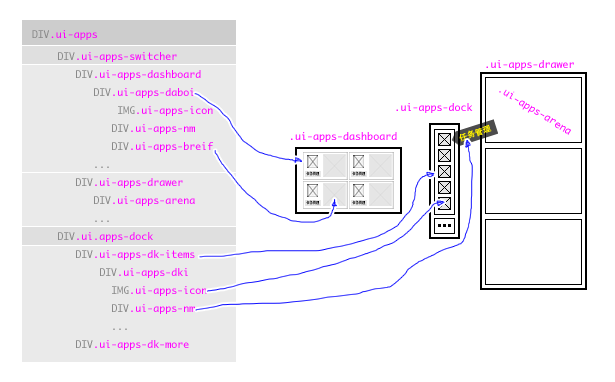
<style>
.page{position:relative;width:615px;height:382px;background:#ffffff}
.page>*{position:absolute;margin:0}
.t1{font:10px "Monaco";color:#ff00ff}
.t2{font:10px "Monaco";color:#898989}
.t3{font:10px/18px "Monaco";color:#ff00ff}
.t4{font:10px/18px "Monaco";color:#898989}
.t5{font:8px "AdobeHeitiStd-Regular";color:#fff100;font-weight:bold}
.t6{font:4px "AdobeHeitiStd-Regular";color:#000000;font-weight:bold;scale:0.77 1}
</style>
<div class="page">
<p class="t1" style="left:32px;top:30px;width:65px;height:10px"><span class="t2">DIV</span>.ui-apps</p>
<p class="t3" style="left:58px;top:52px;width:155px;height:298px"><span class="t4">DIV</span>.ui-apps-switcher<br><span class="t4">   DIV</span>.ui-apps-dashboard<br><span class="t4"> DIV</span>.ui-apps-daboi<br><span class="t4">     IMG</span>.ui-apps-icon<br><span class="t4">         DIV</span>.ui-apps-nm<br><span class="t4">         DIV</span>.ui-apps-breif<br><span class="t4"> ...<br>   DIV</span>.ui-apps-drawer<br><span class="t4">      DIV</span>.ui-apps-arena<br>      <span class="t4">...<br>DIV</span>.ui.apps-dock<br><span class="t4">   DIV</span>.ui-apps-dk-items<br><span class="t4">       DIV</span>.ui-apps-dki<br><span class="t4">         IMG</span>.ui-apps-icon<br>         <span class="t4">DIV</span>.ui-apps-nm<br><span class="t4">         ...<br>   DIV</span>.ui-apps-dk-more</p>
<p class="t1" style="left:486px;top:60px;width:88px;height:10px">.ui-apps-drawer</p>
<p class="t1" style="left:499px;top:89px;width:72px;height:46px;rotate:31deg">.ui-apps-arena</p>
<p class="t1" style="left:396px;top:103px;width:77px;height:10px">.ui-apps-dock</p>
<p class="t5" style="left:459px;top:124px;width:33px;height:18px;rotate:-18deg">任务管理</p>
<p class="t1" style="left:291px;top:132px;width:106px;height:10px">.ui-apps-dashboard</p>
<p class="t6" style="left:306px;top:171px;width:14px;height:5px">任务管理</p>
<p class="t6" style="left:352px;top:171px;width:14px;height:5px">任务管理</p>
<p class="t6" style="left:306px;top:200px;width:14px;height:5px">任务管理</p>
<p class="t6" style="left:352px;top:200px;width:14px;height:5px">任务管理</p>
</div>
